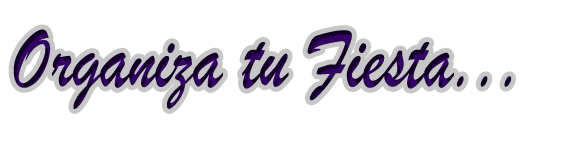
<style>
.page{position:relative;width:567px;height:142px;background:#ffffff}
.page>*{position:absolute;margin:0}
.t1{font:90.2px "BrushScriptMT";scale:0.79 1}
</style>
<div class="page">
<p class="t1" style="left:13px;top:29px;width:499px;height:80px">Organiza tu Fiesta...</p>
</div>
